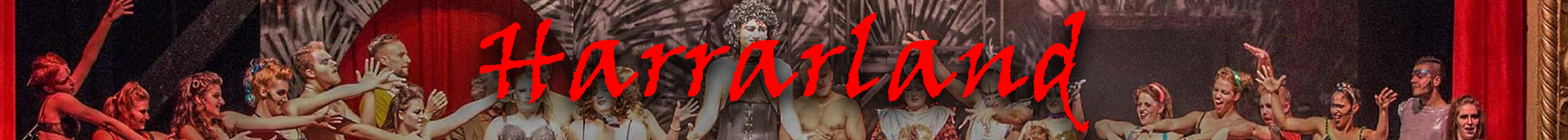
<style>
.page{position:relative;width:1568px;height:140px}
.page>*{position:absolute;margin:0}
.t1{font:112px "VinerHandITC";color:#ff0000}
</style>
<div class="page">
<p class="t1" style="left:479px;top:10px;width:610px;height:123px">Harrarland</p>
</div>
